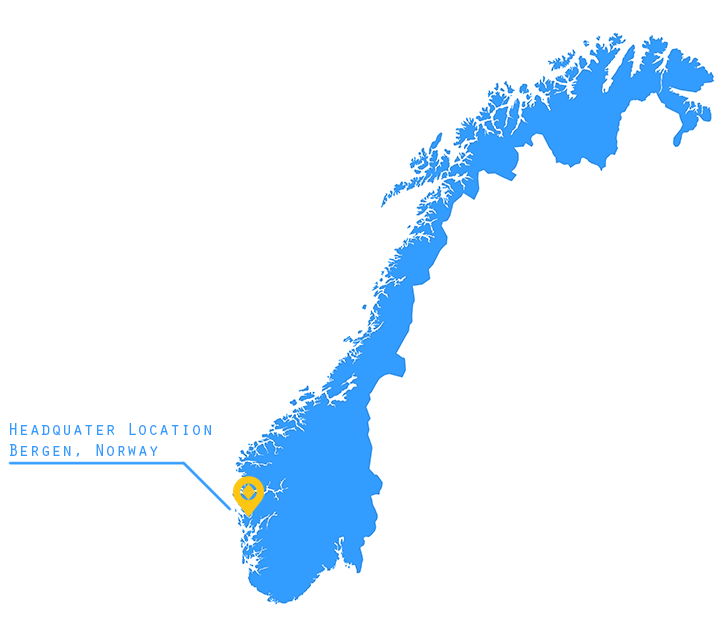
<style>
.page{position:relative;width:721px;height:636px;background:#ffffff}
.page>*{position:absolute;margin:0}
.t1{font:18px "OratorStd";color:#329cff}
</style>
<div class="page">
<p class="t1" style="left:10px;top:423px;width:201px;height:34px;text-align:right">Headquater Location<br>Bergen, Norway</p>
</div>
